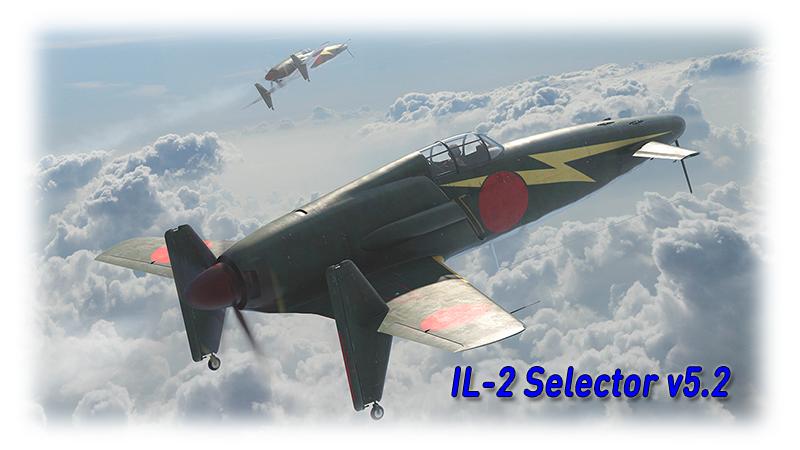
<style>
.page{position:relative;width:800px;height:450px}
.page>*{position:absolute;margin:0}
.t1{font:40px "DINRoundPro-Medi";color:#0000ff;font-weight:bold;font-style:italic;scale:0.83 1}
</style>
<div class="page">
<p class="t1" style="left:452px;top:367px;width:278px;height:30px">IL-2 Selector v5.2</p>
</div>
